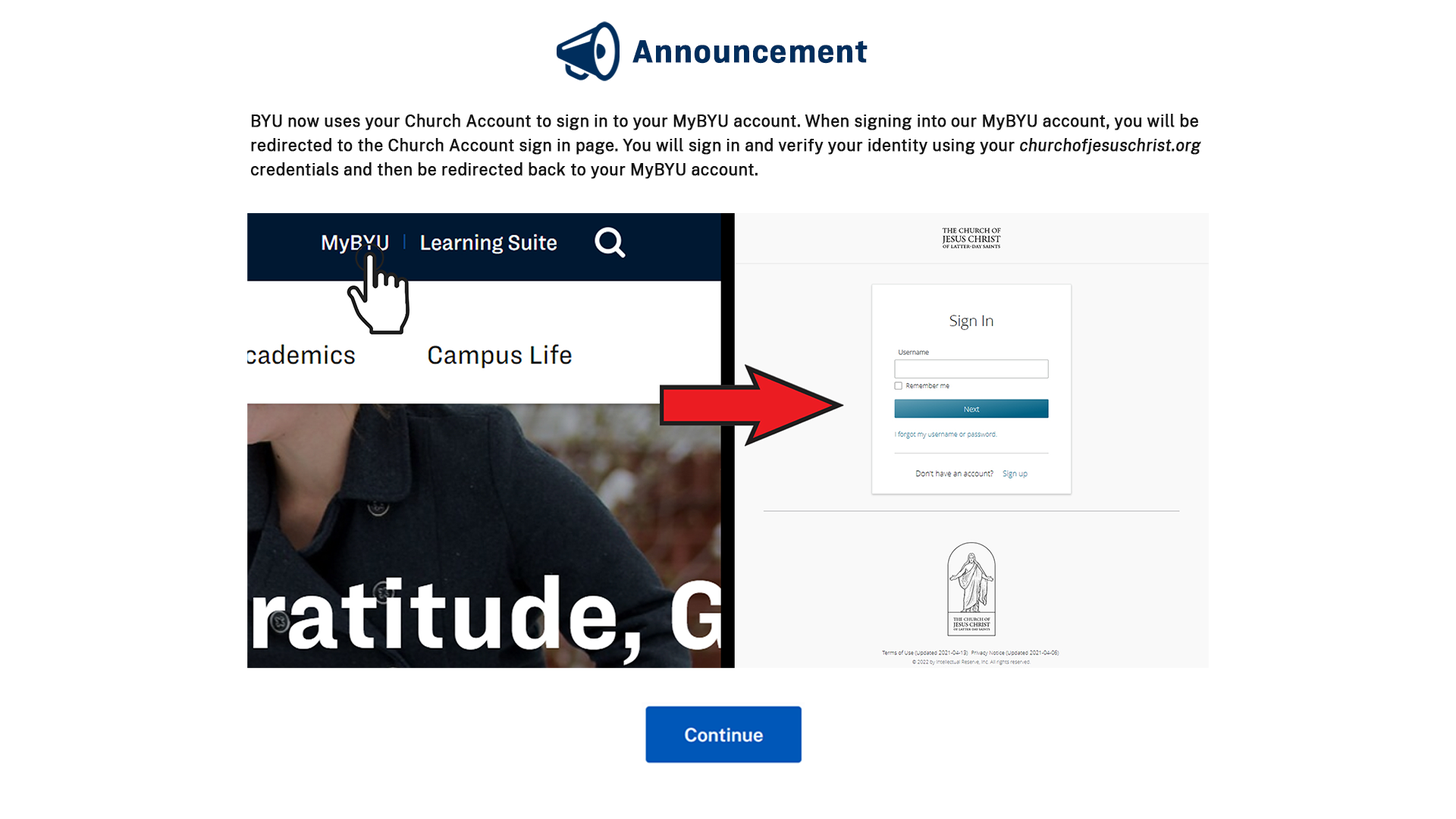
<style>
.page{position:relative;width:1456px;height:819px;background:#ffffff}
.page>*{position:absolute;margin:0}
.t1{font:30.3px "RingsideNarrowSSm-Bold";letter-spacing:0.01em;color:#002e5d;font-weight:bold;scale:0.97 1}
.t2{font:16.7px/24.3px "PublicSans-Regular";color:#141414;font-weight:bold;scale:0.97 1}
.t3{font:16.7px/24.3px "PublicSans-Italic";color:#141414;font-weight:bold;scale:0.97 1}
</style>
<div class="page">
<p class="t1" style="left:632px;top:40px;width:236px;height:24px">Announcement</p>
<p class="t2" style="left:250px;top:114px;width:951px;height:65px">BYU now uses your Church Account to sign in to your MyBYU account. When signing into our MyBYU account, you will be redirected to the Church Account sign in page. You will sign in and verify your identity using your <span class="t3">churchofjesuschrist.org</span> credentials and then be redirected back to your MyBYU account.</p>
</div>
